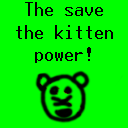
<style>
.page{position:relative;width:128px;height:128px;background:#00ff00}
.page>*{position:absolute;margin:0}
.t1{font:18.7px "Terminal";color:#000000}
</style>
<div class="page">
<p class="t1" style="left:16px;top:2px;width:97px;height:61px;text-align:center">The save<br>the kitten power!</p>
</div>
